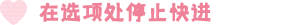
<style>
.page{position:relative;width:288px;height:25px;background:#ffffff}
.page>*{position:absolute;margin:0}
.t1{font:21.2px "shetumodengxiaofangti";color:#ef8299;font-weight:bold}
</style>
<div class="page">
<p class="t1" style="left:39px;top:2px;width:172px;height:20px">在选项处停止快进</p>
</div>
